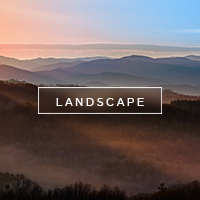
<style>
.page{position:relative;width:200px;height:200px}
.page>*{position:absolute;margin:0}
.t1{font:11.9px "IstokWeb-Regular";letter-spacing:0.2em;color:#ffffff;text-transform:uppercase}
</style>
<div class="page">
<p class="t1" style="left:56px;top:98px;width:88px;height:8px">LANDSCAPE</p>
</div>
